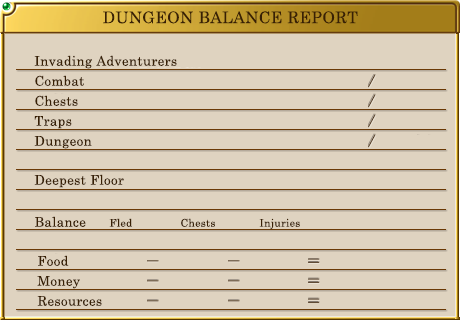
<style>
.page{position:relative;width:460px;height:320px;background:#dfd3c0}
.page>*{position:absolute;margin:0}
.t1{font:16px "CenturySchoolbook";letter-spacing:0.025em;color:#382005}
.t2{font:13.3px "CenturySchoolbook";letter-spacing:0.025em;color:#382005}
.t3{font:10.7px "CenturySchoolbook";letter-spacing:0.025em;color:#382005}
</style>
<div class="page">
<p class="t1" style="left:103px;top:11px;width:255px;height:13px">DUNGEON BALANCE REPORT</p>
<p class="t2" style="left:34px;top:55px;width:143px;height:14px">Invading Adventurers</p>
<p class="t2" style="left:35px;top:75px;width:49px;height:11px">Combat</p>
<p class="t2" style="left:35px;top:95px;width:43px;height:11px">Chests</p>
<p class="t2" style="left:34px;top:116px;width:38px;height:13px">Traps</p>
<p class="t2" style="left:34px;top:136px;width:58px;height:13px">Dungeon</p>
<p class="t2" style="left:34px;top:174px;width:90px;height:14px">Deepest Floor</p>
<p class="t2" style="left:35px;top:216px;width:51px;height:11px">Balance</p>
<p class="t3" style="left:109px;top:218px;width:23px;height:9px">Fled</p>
<p class="t3" style="left:181px;top:218px;width:34px;height:9px">Chests</p>
<p class="t3" style="left:259px;top:218px;width:41px;height:11px">Injuries</p>
<p class="t2" style="left:38px;top:255px;width:31px;height:11px">Food</p>
<p class="t2" style="left:37px;top:276px;width:43px;height:13px">Money</p>
<p class="t2" style="left:37px;top:296px;width:65px;height:10px">Resources</p>
</div>
